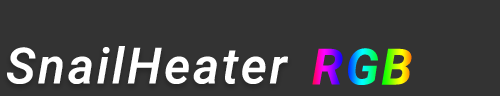
<style>
.page{position:relative;width:500px;height:96px;background:#333333}
.page>*{position:absolute;margin:0}
.t1{font:50px "Roboto-MediumItalic";letter-spacing:0.05em;color:#ffffff}
</style>
<div class="page">
<p class="t1" style="left:7px;top:46px;width:281px;height:38px">SnailHeater</p>
</div>
